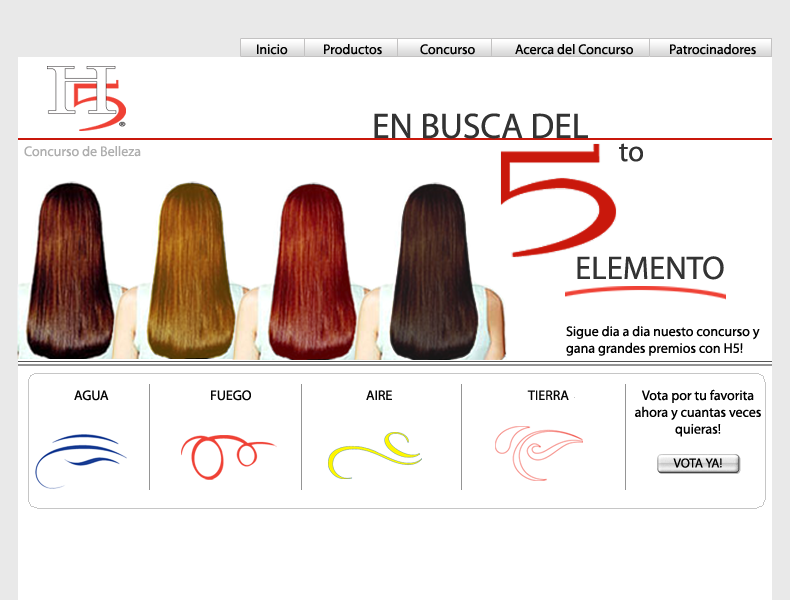
<style>
.page{position:relative;width:790px;height:600px;background:#ffffff}
.page>*{position:absolute;margin:0}
.t1{font:14px "Myriad-Roman";color:#000000}
.t2{font:35.6px "Myriad-Roman";color:#333333}
.t3{font:14px "Myriad-Roman";color:#aeaeae}
.t4{font:29.1px "Myriad-Roman";color:#333333}
.t5{font:32.8px "Myriad-Roman";color:#333333}
.t6{font:14px "Myriad-Roman";color:#050505}
.t7{font:13px "Myriad-Roman";color:#000000}
</style>
<div class="page">
<p class="t1" style="left:257px;top:44px;width:31px;height:11px">Inicio</p>
<p class="t1" style="left:324px;top:44px;width:58px;height:11px">Productos</p>
<p class="t1" style="left:420px;top:44px;width:55px;height:11px">Concurso</p>
<p class="t1" style="left:515px;top:44px;width:118px;height:11px">Acerca del Concurso</p>
<p class="t1" style="left:670px;top:44px;width:86px;height:11px">Patrocinadores</p>
<p class="t2" style="left:374px;top:113px;width:214px;height:26px">EN BUSCA DEL</p>
<p class="t3" style="left:24px;top:146px;width:117px;height:11px">Concurso de Belleza</p>
<p class="t4" style="left:619px;top:143px;width:24px;height:19px">to</p>
<p class="t5" style="left:577px;top:256px;width:147px;height:24px">ELEMENTO</p>
<p class="t1" style="left:566px;top:326px;width:194px;height:30px">Sigue dia a dia nuesto concurso y<br>gana grandes premios con H5!</p>
<p class="t6" style="left:74px;top:390px;width:35px;height:11px">AGUA</p>
<p class="t6" style="left:211px;top:390px;width:40px;height:11px">FUEGO</p>
<p class="t6" style="left:366px;top:390px;width:26px;height:10px">AIRE</p>
<p class="t6" style="left:527px;top:390px;width:42px;height:10px">TIERRA</p>
<p class="t1" style="left:635px;top:389px;width:126px;height:48px;text-align:center">Vota por tu favorita <br>ahora y cuantas veces<br>quieras!</p>
<p class="t7" style="left:673px;top:458px;width:49px;height:10px">VOTA YA!</p>
</div>
